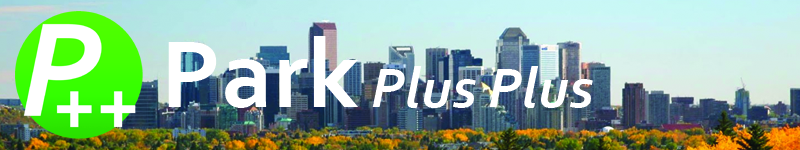
<style>
.page{position:relative;width:800px;height:150px}
.page>*{position:absolute;margin:0}
.t1{font:58.3px "Corbel-BoldItalic";color:#ffffff}
.t2{font:100px "Corbel-Bold";color:#ffffff}
</style>
<div class="page">
<p class="t1" style="left:168px;top:36px;width:425px;height:72px"><span class="t2">Park</span> Plus Plus</p>
</div>
